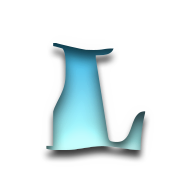
<style>
.page{position:relative;width:192px;height:192px;background:#ffffff}
.page>*{position:absolute;margin:0}
.t1{font:137px "UnderwaterLove";letter-spacing:-0.04em}
</style>
<div class="page">
<p class="t1" style="left:46px;top:43px;width:100px;height:107px">L</p>
</div>
